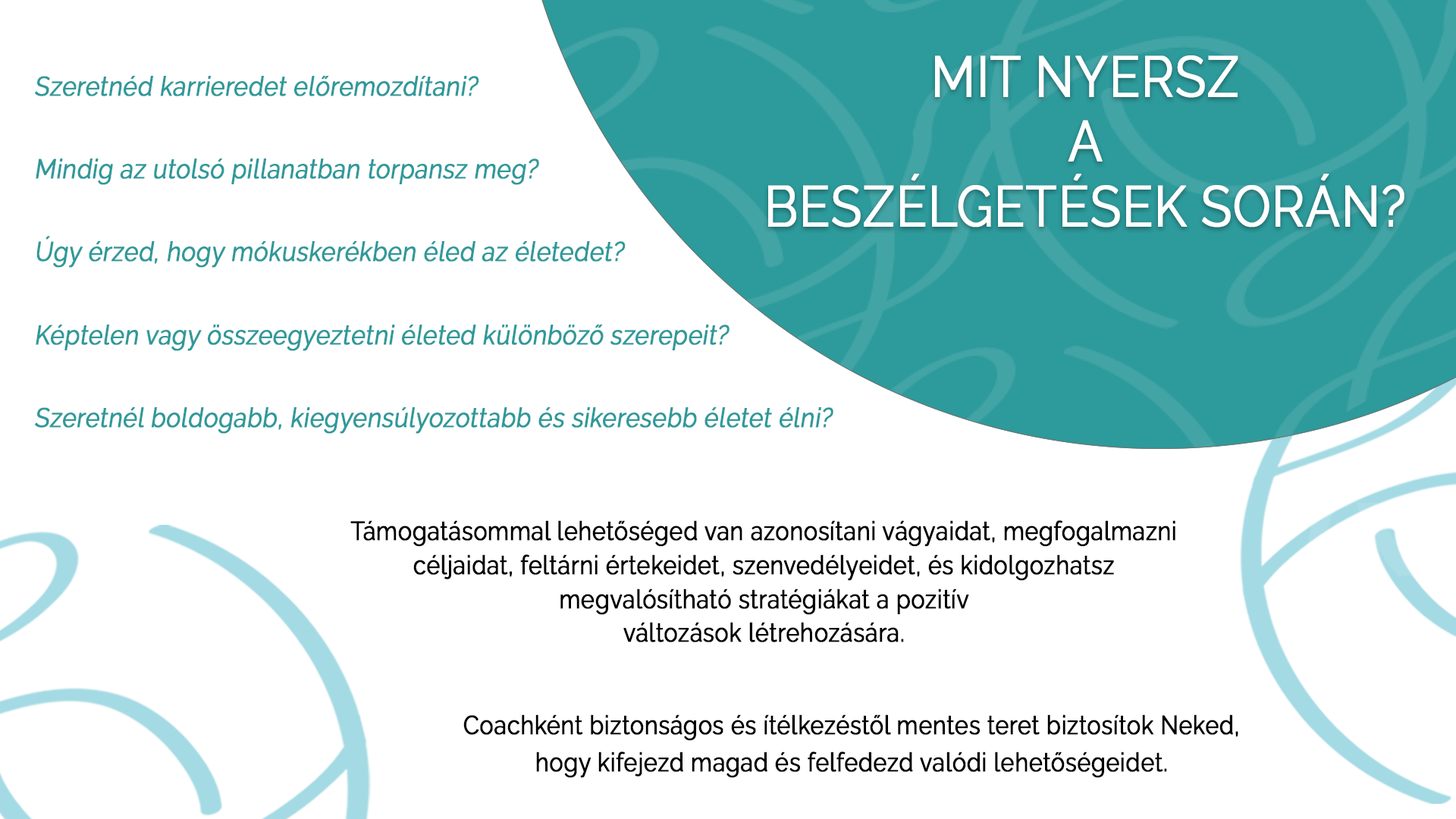
<style>
.page{position:relative;width:1456px;height:819px;background:#ffffff}
.page>*{position:absolute;margin:0}
.t1{font:57.3px/66px "Raleway-Regular";color:#ffffff;font-weight:bold;scale:0.88 1}
.t2{font:27.1px/42.5px "Raleway-Regular";color:#2f999a;font-weight:bold;font-style:italic;scale:0.88 1}
.t3{font:26.3px/34.9px "Raleway-Regular";color:#000000;font-weight:bold;scale:0.88 1}
.t4{font:26.3px/37.9px "Raleway-Regular";color:#000000;font-weight:bold;scale:0.88 1}
</style>
<div class="page">
<p class="t1" style="left:768px;top:55px;width:636px;height:172px;text-align:center">MIT NYERSZ <br>A <br>BESZÉLGETÉSEK SORÁN?</p>
<p class="t2" style="left:35px;top:76px;width:798px;height:358px">Szeretnéd karrieredet előremozdítani?<br><br>Mindig az utolsó pillanatban torpansz meg?<br><br>Úgy érzed, hogy mókuskerékben éled az életedet?<br><br>Képtelen vagy összeegyeztetni életed különböző szerepeit?<br><br>Szeretnél boldogabb, kiegyensúlyozottabb és sikeresebb életet élni?</p>
<p class="t3" style="left:350px;top:520px;width:825px;height:122px;text-align:center">Támogatásommal lehetőséged van azonosítani vágyaidat, megfogalmazni <br>céljaidat, feltárni értekeidet, szenvedélyeidet, és kidolgozhatsz <br>megvalósítható stratégiákat a pozitív <br>változások létrehozására.</p>
<p class="t4" style="left:463px;top:714px;width:775px;height:64px;text-align:center">Coachként biztonságos és ítélkezéstől mentes teret biztosítok Neked, <br>hogy kifejezd magad és felfedezd valódi lehetőségeidet.</p>
</div>
